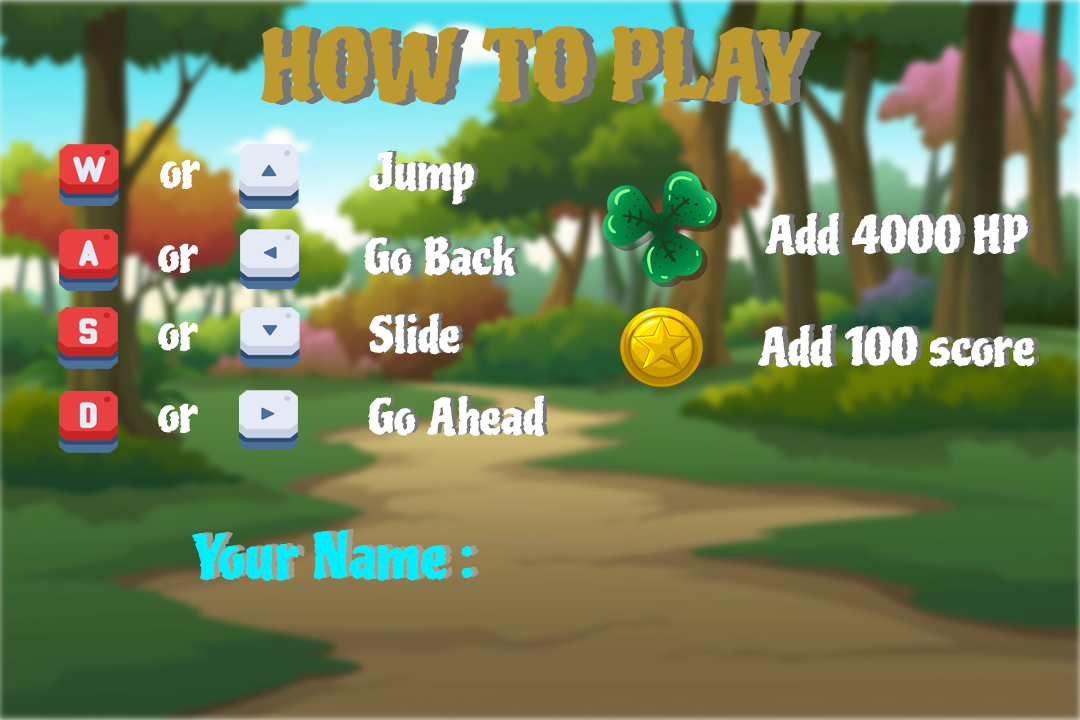
<style>
.page{position:relative;width:1080px;height:720px}
.page>*{position:absolute;margin:0}
.t1{font:95px "Piedra-Regular";color:#bd9a2f}
.t2{font:95px "Piedra-Regular"}
.t3{font:48px "Piedra-Regular"}
.t4{font:48px "Piedra-Regular";color:#ffffff}
.t5{font:50px "Piedra-Regular";color:#ffffff}
.t6{font:50px "Piedra-Regular"}
.t7{font:60px "Piedra-Regular";color:#00f0ff}
.t8{font:60px "Piedra-Regular"}
</style>
<div class="page">
<p class="t1" style="left:261px;top:25px;width:551px;height:80px">HOW TO PLAY</p>
<p class="t2" style="left:271px;top:27px;width:551px;height:80px">HOW TO PLAY</p>
<p class="t3" style="left:373px;top:150px;width:106px;height:54px">Jump</p>
<p class="t4" style="left:160px;top:159px;width:40px;height:30px">or</p>
<p class="t4" style="left:369px;top:151px;width:106px;height:54px">Jump</p>
<p class="t5" style="left:765px;top:213px;width:263px;height:43px">Add 4000 HP</p>
<p class="t4" style="left:158px;top:243px;width:40px;height:30px">or</p>
<p class="t4" style="left:364px;top:236px;width:152px;height:40px">Go Back</p>
<p class="t3" style="left:368px;top:235px;width:152px;height:40px">Go Back</p>
<p class="t4" style="left:369px;top:313px;width:91px;height:42px">Slide</p>
<p class="t3" style="left:373px;top:312px;width:91px;height:42px">Slide</p>
<p class="t4" style="left:158px;top:321px;width:40px;height:30px">or</p>
<p class="t5" style="left:758px;top:325px;width:276px;height:43px">Add 100 score</p>
<p class="t6" style="left:763px;top:324px;width:276px;height:43px">Add 100 score</p>
<p class="t4" style="left:368px;top:395px;width:177px;height:42px">Go Ahead</p>
<p class="t3" style="left:372px;top:394px;width:177px;height:42px">Go Ahead</p>
<p class="t4" style="left:158px;top:403px;width:40px;height:30px">or</p>
<p class="t7" style="left:192px;top:530px;width:281px;height:51px">Your Name :</p>
<p class="t8" style="left:198px;top:529px;width:281px;height:51px">Your Name :</p>
</div>
